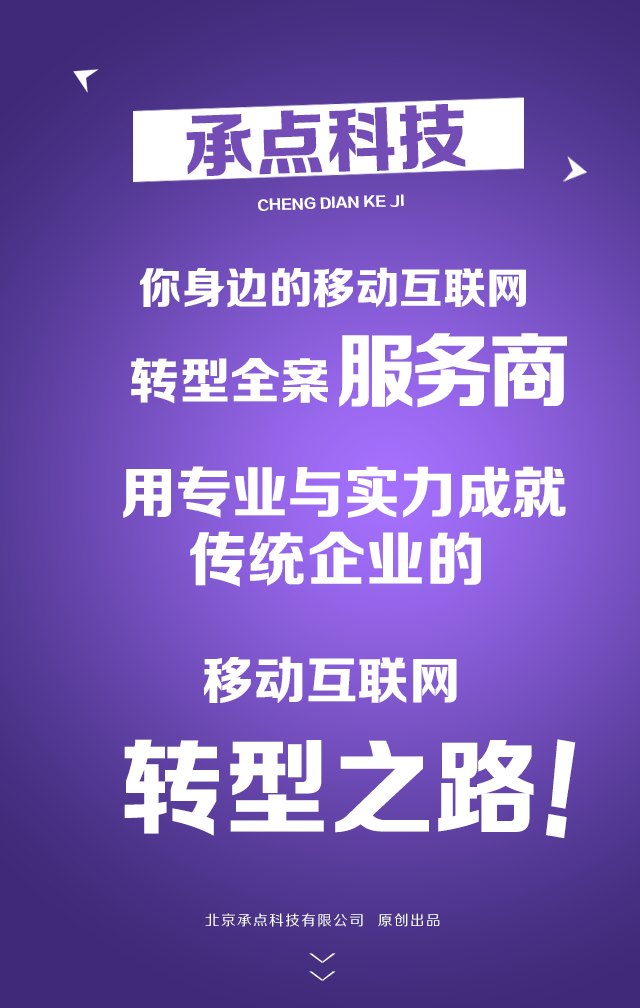
<style>
.page{position:relative;width:640px;height:1008px}
.page>*{position:absolute;margin:0}
.t1{font:71.1px "FZZDHJW--GB1-0";letter-spacing:0.005em;color:#734cb6;text-transform:uppercase}
.t2{font:13.4px "FZZDHJW--GB1-0";letter-spacing:0.005em;color:#ffffff;text-transform:uppercase}
.t3{font:43.5px "FZZDHJW--GB1-0";letter-spacing:0.005em;color:#ffffff;text-transform:uppercase}
.t4{font:82px "FZZDHJW--GB1-0";letter-spacing:-0.075em;color:#ffffff;text-transform:uppercase}
.t5{font:49.4px "FZZDHJW--GB1-0";letter-spacing:0.005em;color:#ffffff;text-transform:uppercase}
.t6{font:56.1px "FZZDHJW--GB1-0";letter-spacing:0.005em;color:#ffffff;text-transform:uppercase}
.t7{font:59.4px "FZZDHJW--GB1-0";letter-spacing:0.005em;color:#ffffff;text-transform:uppercase}
.t8{font:51px "FZZDHJW--GB1-0";letter-spacing:0.005em;color:#ffffff;text-transform:uppercase}
.t9{font:104.6px "FZZDHJW--GB1-0";letter-spacing:0.005em;color:#ffffff;text-transform:uppercase}
.t10{font:113.8px "FZZDHJW--GB1-0";letter-spacing:0.005em;color:#ffffff;text-transform:uppercase;scale:0.83 1}
.t11{font:14.2px "FZZHJW--GB1-0";letter-spacing:0.1em;color:#ffffff;text-transform:uppercase}
.t12{font:36.8px "FZZXHJW--GB1-0";letter-spacing:0.5em;color:#ffffff;text-transform:uppercase;scale:0.44 1}
</style>
<div class="page">
<p class="t1" style="left:186px;top:104px;width:280px;height:73px;rotate:-2deg">承点科技</p>
<p class="t2" style="left:258px;top:194px;width:146px;height:17px;rotate:-2deg">CHENG DIAN KE JI</p>
<p class="t3" style="left:140px;top:267px;width:386px;height:41px">你身边的移动互联网</p>
<p class="t4" style="left:339px;top:333px;width:228px;height:75px">服务商</p>
<p class="t5" style="left:131px;top:358px;width:197px;height:46px">转型全案</p>
<p class="t6" style="left:123px;top:466px;width:443px;height:52px">用专业与实力成就</p>
<p class="t7" style="left:190px;top:531px;width:291px;height:56px">传统企业的</p>
<p class="t8" style="left:204px;top:656px;width:253px;height:47px">移动互联网</p>
<p class="t9" style="left:124px;top:739px;width:410px;height:97px">转型之路</p>
<p class="t10" style="left:546px;top:739px;width:30px;height:100px;rotate:10deg">!</p>
<p class="t11" style="left:205px;top:913px;width:235px;height:14px">北京承点科技有限公司  原创出品</p>
<p class="t12" style="left:309px;top:953px;width:27px;height:28px;rotate:90deg">&gt;&gt;</p>
</div>
